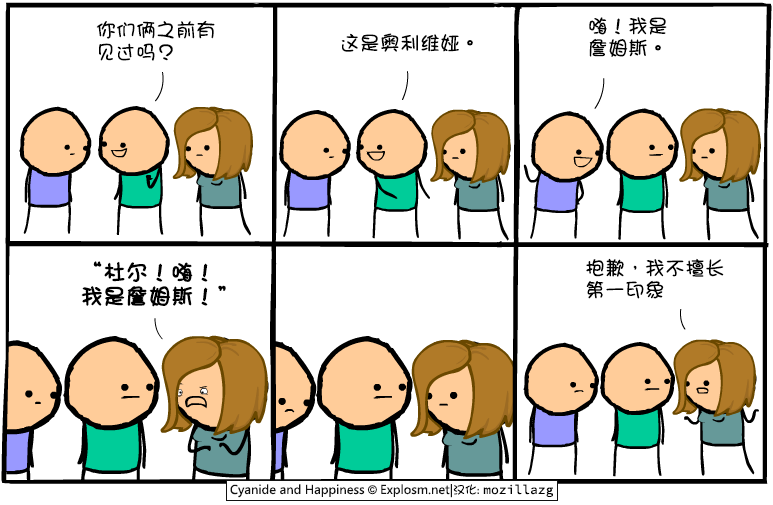
<style>
.page{position:relative;width:773px;height:505px;background:#ffffff}
.page>*{position:absolute;margin:0}
.t1{font:20px/22px "DFGirl";color:#000000}
.t2{font:20px "DFGirl";color:#000000}
.t3{font:22px/24px "DFGirl";color:#000000;font-weight:bold}
</style>
<div class="page">
<p class="t1" style="left:589px;top:17px;width:78px;height:40px">嗨！我是<br>詹姆斯。</p>
<p class="t1" style="left:96px;top:20px;width:119px;height:41px">你们俩之前有<br>见过吗？</p>
<p class="t2" style="left:341px;top:33px;width:132px;height:19px">这是奥利维娅。</p>
<p class="t3" style="left:81px;top:261px;width:145px;height:46px">“杜尔！嗨！<br>我是詹姆斯！”</p>
<p class="t1" style="left:586px;top:258px;width:138px;height:41px">抱歉，我不擅长<br>第一印象</p>
</div>
